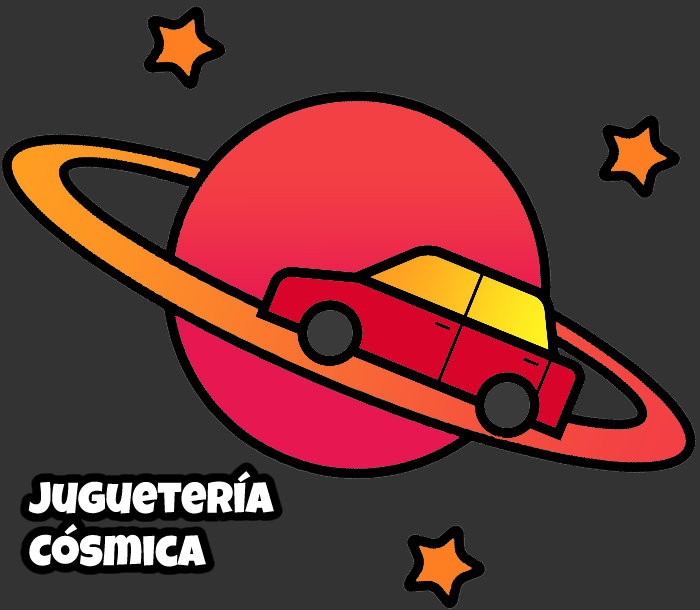
<style>
.page{position:relative;width:700px;height:610px;background:#333333}
.page>*{position:absolute;margin:0}
.t1{font:44px "LuckiestGuy-Regular";color:#ffffff}
</style>
<div class="page">
<p class="t1" style="left:28px;top:471px;width:246px;height:96px">Juguetería<br>Cósmica</p>
</div>
